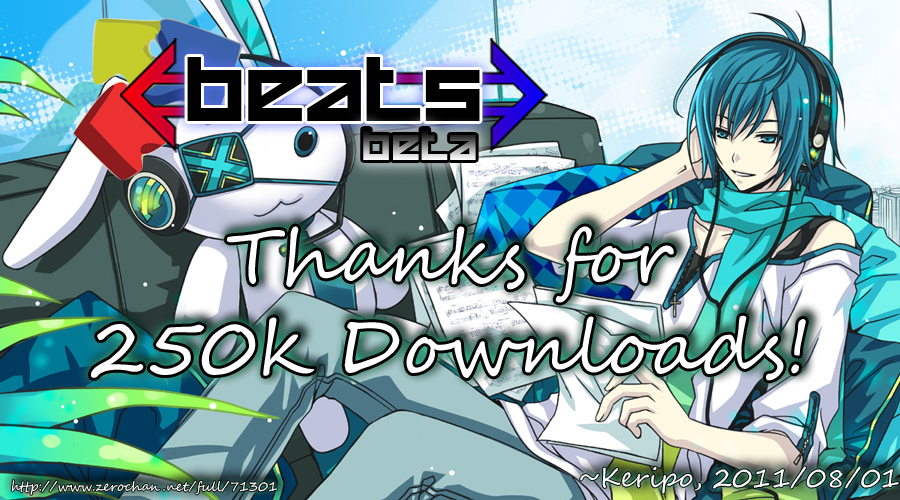
<style>
.page{position:relative;width:900px;height:500px}
.page>*{position:absolute;margin:0}
.t1{font:64px "HappyKiller";color:#000000;scale:1.05 1}
.t2{font:30.9px "HappyKiller";scale:1.05 1}
.t3{font:75.7px "SegoeScript";color:#ffffff}
.t4{font:26.6px "SegoeScript";color:#ffffff}
.t5{font:13.1px "SegoeScript";color:#ffffff}
</style>
<div class="page">
<p class="t1" style="left:187px;top:57px;width:293px;height:64px">beats</p>
<p class="t2" style="left:363px;top:129px;width:113px;height:31px">beta</p>
<p class="t3" style="left:91px;top:226px;width:715px;height:155px;text-align:center">Thanks for<br>250k Downloads!</p>
<p class="t4" style="left:580px;top:466px;width:319px;height:28px">~Keripo, 2011/08/01</p>
<p class="t5" style="left:11px;top:480px;width:266px;height:15px">http://www.zerochan.net/full/71301</p>
</div>
